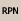
<style>
.page{position:relative;width:21px;height:21px;background:#d9cdc1}
.page>*{position:absolute;margin:0}
.t1{font:9px "Tahoma";color:#000000}
</style>
<div class="page">
<p class="t1" style="left:2px;top:7px;width:16px;height:7px">RPN</p>
</div>
